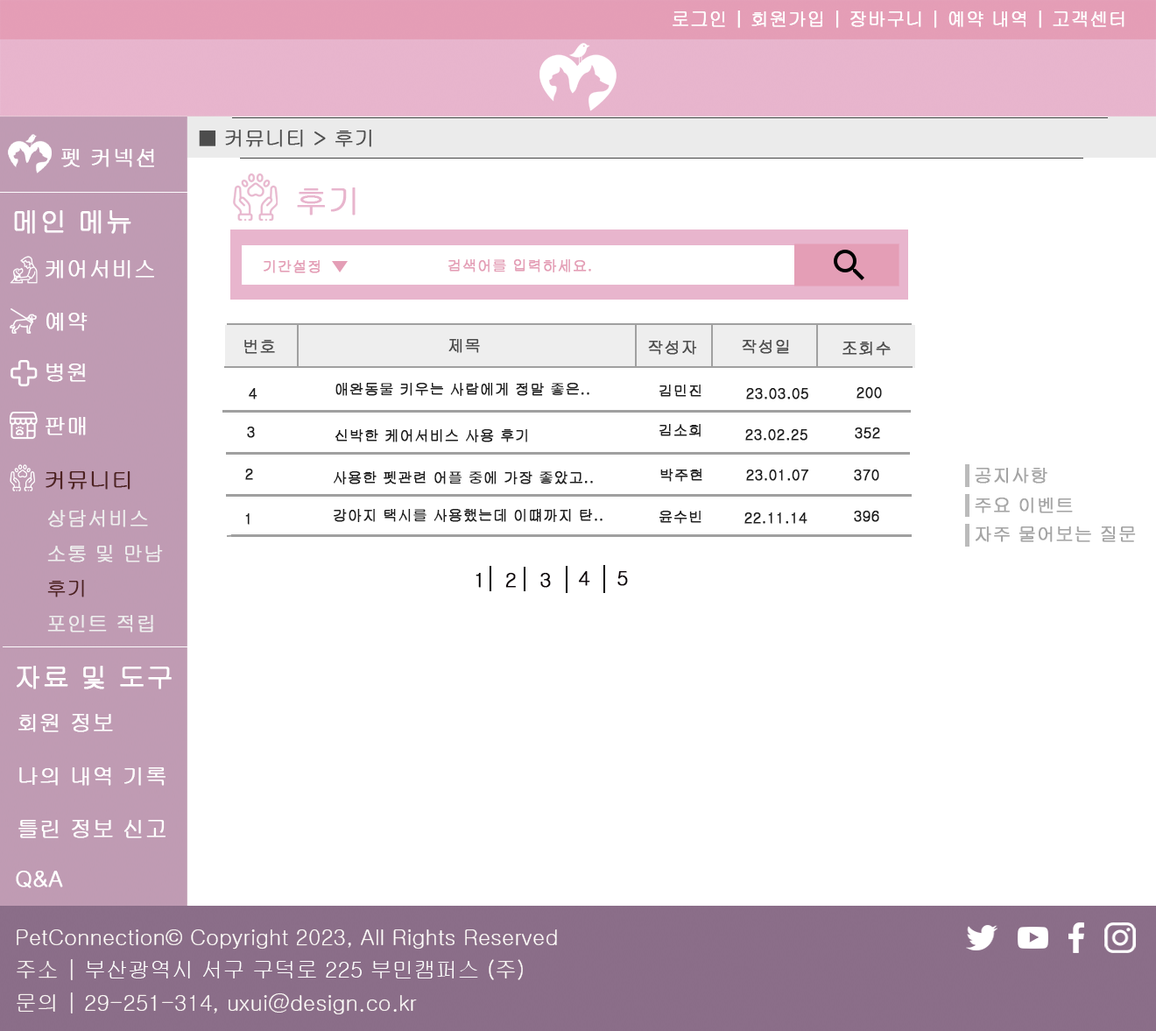
<style>
.page{position:relative;width:1156px;height:1031px;background:#ffffff}
.page>*{position:absolute;margin:0}
.t1{font:18.4px "Gulim";color:#ffffff;font-weight:bold}
.t2{font:20.1px "Gulim";color:#4d4d4d;font-weight:bold}
.t3{font:21.9px "Gulim";color:#ffffff;font-weight:bold}
.t4{font:32.9px "Gulim";color:#e8b5cd;font-weight:bold}
.t5{font:27.4px "Gulim";color:#ffffff;font-weight:bold}
.t6{font:14.6px "Gulim";color:#e49eb6;font-weight:bold}
.t7{font:16.4px "Gulim";color:#4d4d4d;font-weight:bold}
.t8{font:14.6px "Gulim";color:#1e1e1e;font-weight:bold}
.t9{font:21.9px "Gulim";color:#4e2222;font-weight:bold}
.t10{font:18.3px "Gulim";color:#a5a5a5;font-weight:bold}
.t11{font:20.1px "Gulim";color:#eeeeee;font-weight:bold}
.t12{font:20.1px "Gulim";color:#4f2222;font-weight:bold}
.t13{font:20.1px "Gulim";color:#010000;font-weight:bold}
.t14{font:20.1px "Gulim";color:#000000;font-weight:bold}
.t15{font:20.1px "Gulim";color:#0d0408;font-weight:bold}
.t16{font:21.9px/32.9px "Gulim";color:#ffffff}
</style>
<div class="page">
<p class="t1" style="left:673px;top:11px;width:452px;height:17px">로그인 | 회원가입 | 장바구니 | 예약 내역 | 고객센터</p>
<p class="t2" style="left:199px;top:130px;width:172px;height:17px">■ 커뮤니티 &gt; 후기</p>
<p class="t3" style="left:61px;top:149px;width:93px;height:18px">펫 커넥션</p>
<p class="t4" style="left:297px;top:187px;width:59px;height:29px">후기</p>
<p class="t5" style="left:14px;top:210px;width:117px;height:24px">메인 메뉴</p>
<p class="t3" style="left:46px;top:260px;width:108px;height:19px">케어서비스</p>
<p class="t6" style="left:264px;top:260px;width:56px;height:13px">기간설정</p>
<p class="t6" style="left:449px;top:259px;width:142px;height:13px">검색어를 입력하세요.</p>
<p class="t3" style="left:46px;top:313px;width:42px;height:18px">예약</p>
<p class="t7" style="left:244px;top:340px;width:31px;height:14px">번호</p>
<p class="t7" style="left:449px;top:339px;width:31px;height:14px">제목</p>
<p class="t7" style="left:648px;top:341px;width:49px;height:14px">작성자</p>
<p class="t7" style="left:742px;top:340px;width:47px;height:14px">작성일</p>
<p class="t7" style="left:843px;top:342px;width:48px;height:14px">조회수</p>
<p class="t3" style="left:46px;top:364px;width:40px;height:18px">병원</p>
<p class="t8" style="left:249px;top:388px;width:9px;height:11px">4</p>
<p class="t8" style="left:336px;top:383px;width:254px;height:13px">애완동물 키우는 사람에게 정말 좋은..</p>
<p class="t8" style="left:660px;top:385px;width:42px;height:12px">김민진</p>
<p class="t8" style="left:746px;top:388px;width:63px;height:11px">23.03.05</p>
<p class="t8" style="left:857px;top:387px;width:25px;height:12px">200</p>
<p class="t3" style="left:46px;top:417px;width:40px;height:18px">판매</p>
<p class="t8" style="left:660px;top:424px;width:41px;height:13px">김소희</p>
<p class="t8" style="left:247px;top:427px;width:8px;height:11px">3</p>
<p class="t8" style="left:336px;top:429px;width:191px;height:13px">신박한 케어서비스 사용 후기</p>
<p class="t8" style="left:746px;top:429px;width:62px;height:12px">23.02.25</p>
<p class="t8" style="left:855px;top:428px;width:25px;height:11px">352</p>
<p class="t9" style="left:46px;top:471px;width:85px;height:19px">커뮤니티</p>
<p class="t8" style="left:245px;top:469px;width:8px;height:11px">2</p>
<p class="t8" style="left:334px;top:471px;width:259px;height:13px">사용한 펫관련 어플 중에 가장 좋았고..</p>
<p class="t8" style="left:661px;top:469px;width:42px;height:13px">박주현</p>
<p class="t8" style="left:746px;top:470px;width:63px;height:11px">23.01.07</p>
<p class="t8" style="left:854px;top:470px;width:26px;height:11px">370</p>
<p class="t10" style="left:975px;top:468px;width:73px;height:16px">공지사항</p>
<p class="t10" style="left:975px;top:498px;width:98px;height:15px">주요 이벤트</p>
<p class="t11" style="left:47px;top:510px;width:116px;height:123px">상담서비스<br>소통 및 만남<br><span class="t12">후기<br></span>포인트 적립</p>
<p class="t8" style="left:334px;top:509px;width:269px;height:13px">강아지 택시를 사용했는데 이떄까지 탄..</p>
<p class="t8" style="left:245px;top:513px;width:5px;height:12px">1</p>
<p class="t8" style="left:660px;top:511px;width:42px;height:13px">윤수빈</p>
<p class="t8" style="left:745px;top:513px;width:63px;height:11px">22.11.14</p>
<p class="t8" style="left:854px;top:511px;width:26px;height:11px">396</p>
<p class="t10" style="left:976px;top:527px;width:160px;height:15px">자주 물어보는 질문</p>
<p class="t13" style="left:476px;top:573px;width:5px;height:15px">1</p>
<p class="t14" style="left:505px;top:573px;width:11px;height:15px">2</p>
<p class="t15" style="left:541px;top:573px;width:10px;height:15px">3</p>
<p class="t15" style="left:578px;top:571px;width:12px;height:15px">4</p>
<p class="t15" style="left:618px;top:571px;width:10px;height:15px">5</p>
<p class="t5" style="left:17px;top:666px;width:155px;height:23px">자료 및 도구</p>
<p class="t3" style="left:18px;top:714px;width:95px;height:18px">회원 정보</p>
<p class="t3" style="left:19px;top:767px;width:147px;height:19px">나의 내역 기록</p>
<p class="t3" style="left:18px;top:820px;width:148px;height:18px">틀린 정보 신고</p>
<p class="t3" style="left:16px;top:871px;width:47px;height:17px">Q&amp;A</p>
<p class="t16" style="left:17px;top:930px;width:540px;height:84px">PetConnection© Copyright 2023, All Rights Reserved<br>주소 | 부산광역시 서구 구덕로 225 부민캠퍼스 (주)<br>문의 | 29-251-314, uxui@design.co.kr</p>
</div>
